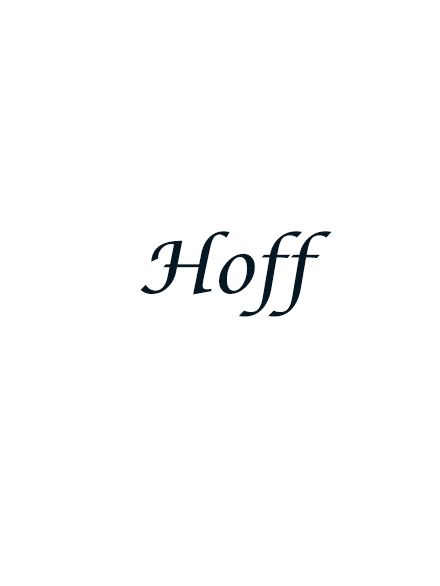
<style>
.page{position:relative;width:440px;height:586px;background:#ffffff}
.page>*{position:absolute;margin:0}
.t1{font:72px "LucidaCalligraphy-Italic";color:#041723}
</style>
<div class="page">
<p class="t1" style="left:140px;top:231px;width:192px;height:86px">Hoff</p>
</div>
